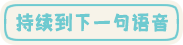
<style>
.page{position:relative;width:183px;height:45px;background:#f7f3e9}
.page>*{position:absolute;margin:0}
.t1{font:12px "shetumodengxiaofangti";color:#6ecad0;font-weight:bold;scale:0.94 1}
</style>
<div class="page">
<p class="t1" style="left:16px;top:13px;width:152px;height:19px">持续到下一句语音</p>
</div>
